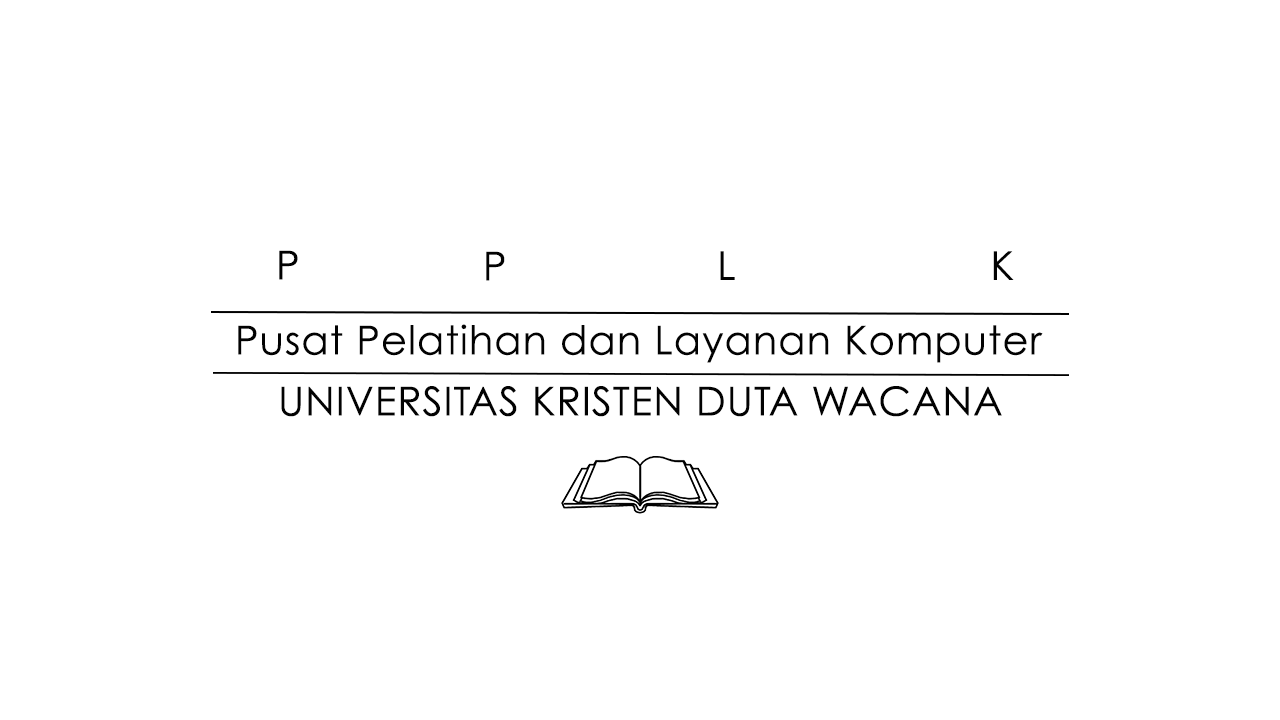
<style>
.page{position:relative;width:1280px;height:720px;background:#ffffff}
.page>*{position:absolute;margin:0}
.t1{font:40px "WeezerFont";letter-spacing:0.025em;color:#020202}
</style>
<div class="page">
<p class="t1" style="left:279px;top:250px;width:19px;height:30px">P</p>
<p class="t1" style="left:486px;top:251px;width:19px;height:30px">P</p>
<p class="t1" style="left:720px;top:251px;width:15px;height:29px">L</p>
<p class="t1" style="left:993px;top:251px;width:21px;height:29px">K</p>
<p class="t1" style="left:238px;top:324px;width:805px;height:39px">Pusat Pelatihan dan Layanan Komputer</p>
<p class="t1" style="left:281px;top:386px;width:721px;height:31px">UNIVERSITAS KRISTEN DUTA WACANA</p>
</div>
